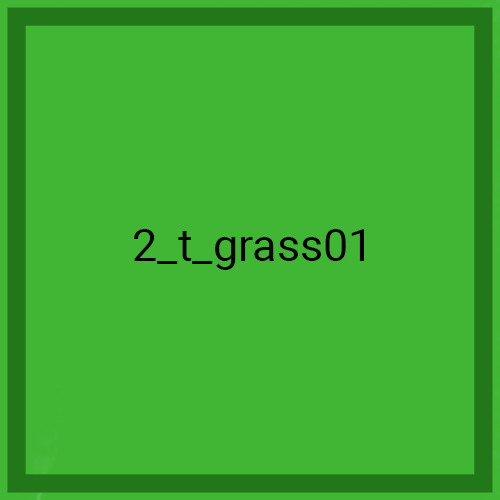
<style>
.page{position:relative;width:500px;height:500px;background:#40b634}
.page>*{position:absolute;margin:0}
.t1{font:45px "Roboto-Regular";color:#000000}
</style>
<div class="page">
<p class="t1" style="left:134px;top:229px;width:230px;height:41px">2_t_grass01</p>
</div>
